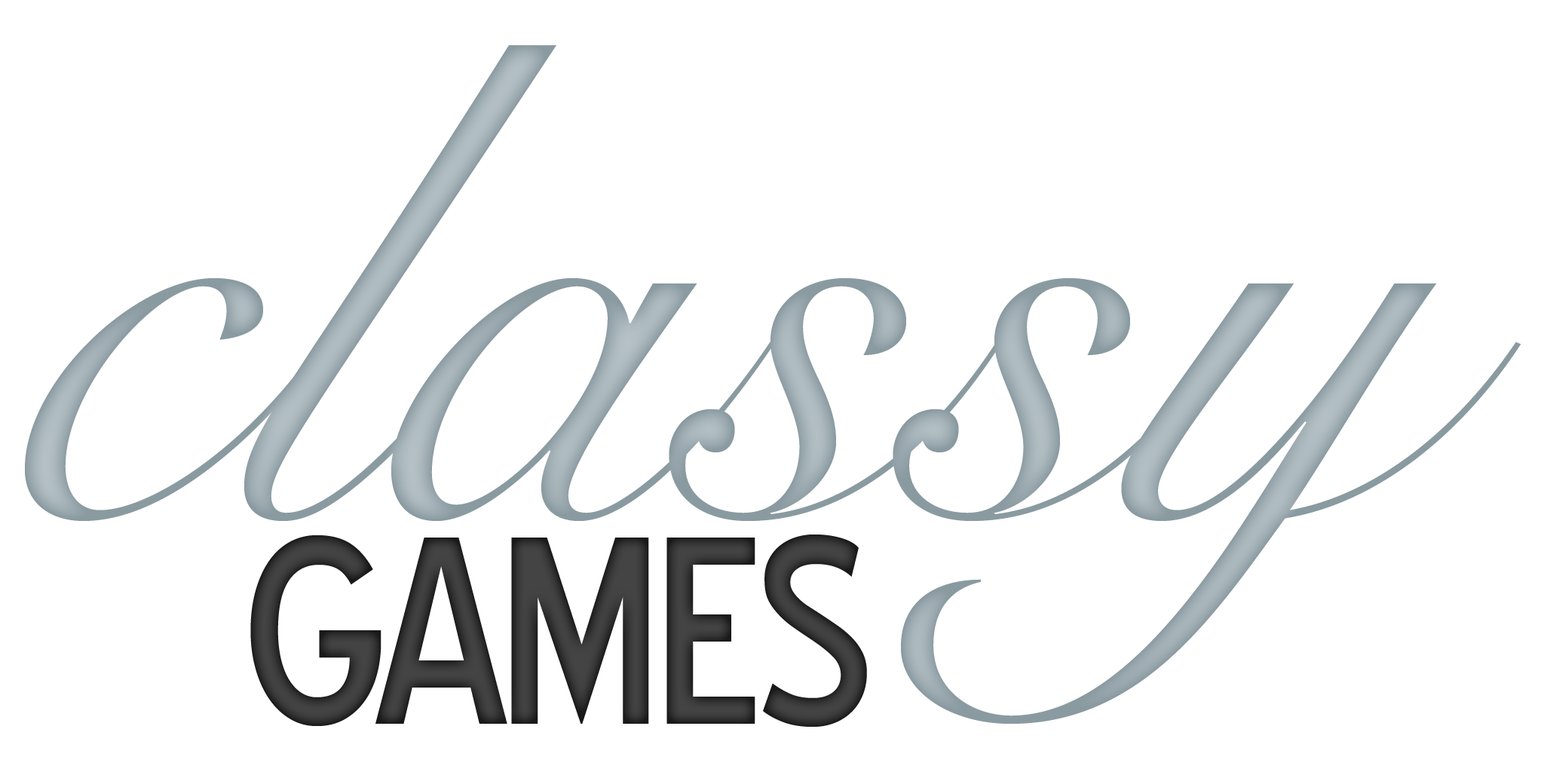
<style>
.page{position:relative;width:1544px;height:772px;background:#ffffff}
.page>*{position:absolute;margin:0}
.t1{font:675.6px "SnellRoundhandLTStd-Scr";letter-spacing:-0.025em;color:#9dabb1}
.t2{font:675.6px "SnellRoundhandLTStd-Scr";color:#9dabb1}
.t3{font:259.4px "BlueHighwayD-Regular";letter-spacing:-0.05em;color:#444444}
</style>
<div class="page">
<p class="t1" style="left:25px;top:45px;width:1497px;height:679px"><span class="t2">c</span>lassy</p>
<p class="t3" style="left:250px;top:535px;width:617px;height:192px">GAMES</p>
</div>
